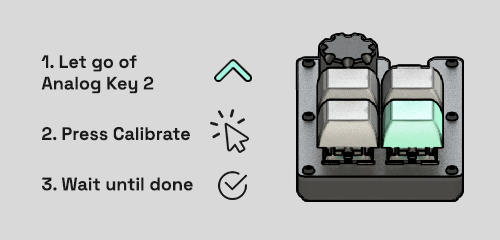
<style>
.page{position:relative;width:500px;height:240px;background:#d9d9d9}
.page>*{position:absolute;margin:0}
.t1{font:18px "SpaceGrotesk-SemiBold";color:#1a1a1a}
</style>
<div class="page">
<p class="t1" style="left:41px;top:55px;width:152px;height:136px">1. Let go of<br>Analog Key 2<br> <br>2. Press Calibrate<br> <br>3. Wait until done</p>
</div>
